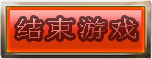
<style>
.page{position:relative;width:152px;height:59px}
.page>*{position:absolute;margin:0}
.t1{font:23px "SimSun";letter-spacing:0.08em;scale:1.25 1}
</style>
<div class="page">
<p class="t1" style="left:17px;top:18px;width:119px;height:21px">结束游戏</p>
</div>
